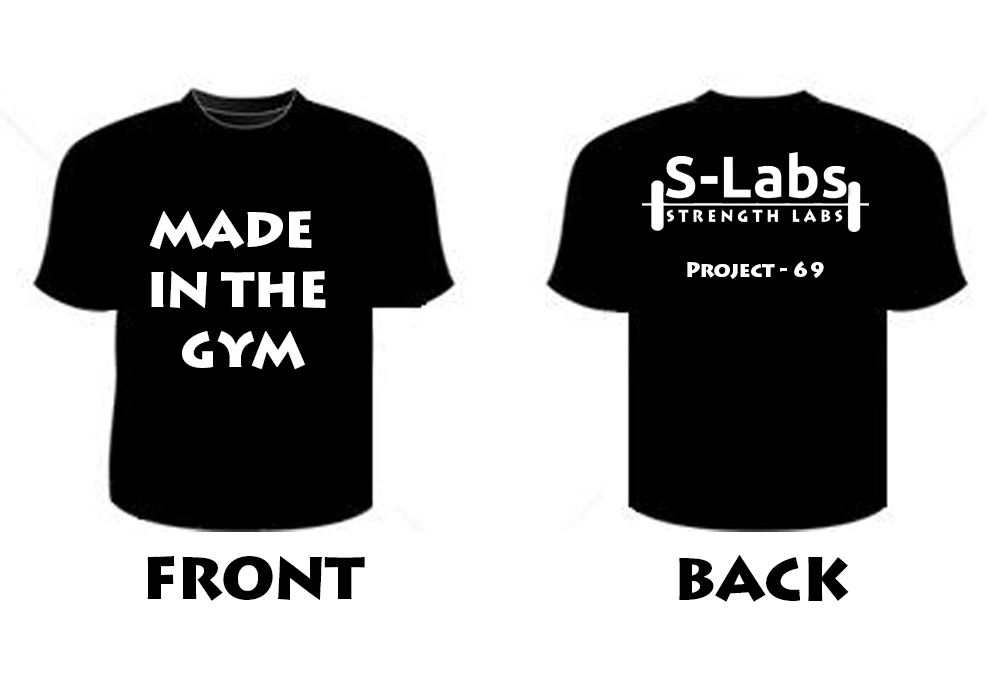
<style>
.page{position:relative;width:1000px;height:700px;background:#ffffff}
.page>*{position:absolute;margin:0}
.t1{font:50px "LithosPro-Black";letter-spacing:-0.025em;color:#fefefe}
.t2{font:21px "LithosPro-Black";letter-spacing:-0.025em;color:#ffffff}
.t3{font:60px "LithosPro-Black";letter-spacing:-0.025em;color:#000000}
</style>
<div class="page">
<p class="t1" style="left:149px;top:209px;width:177px;height:161px;text-align:center">MADE <br>IN THE<br> GYM</p>
<p class="t2" style="left:687px;top:261px;width:137px;height:18px">Project - 69</p>
<p class="t3" style="left:147px;top:556px;width:218px;height:45px">FRONT</p>
<p class="t3" style="left:679px;top:555px;width:170px;height:47px">BACK</p>
</div>
